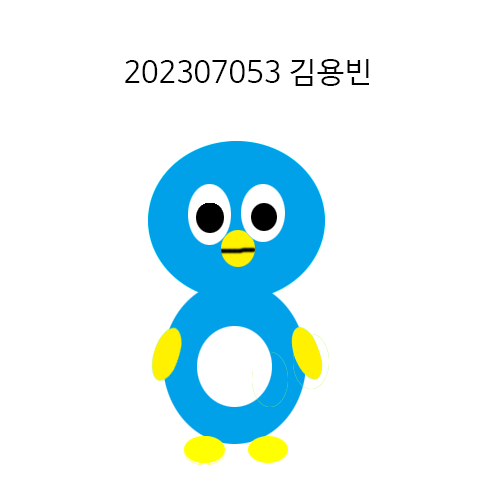
<style>
.page{position:relative;width:500px;height:500px;background:#ffffff}
.page>*{position:absolute;margin:0}
.t1{font:30px "HancomGothicRegular";color:#000000}
</style>
<div class="page">
<p class="t1" style="left:125px;top:59px;width:244px;height:27px">202307053 김용빈</p>
</div>
